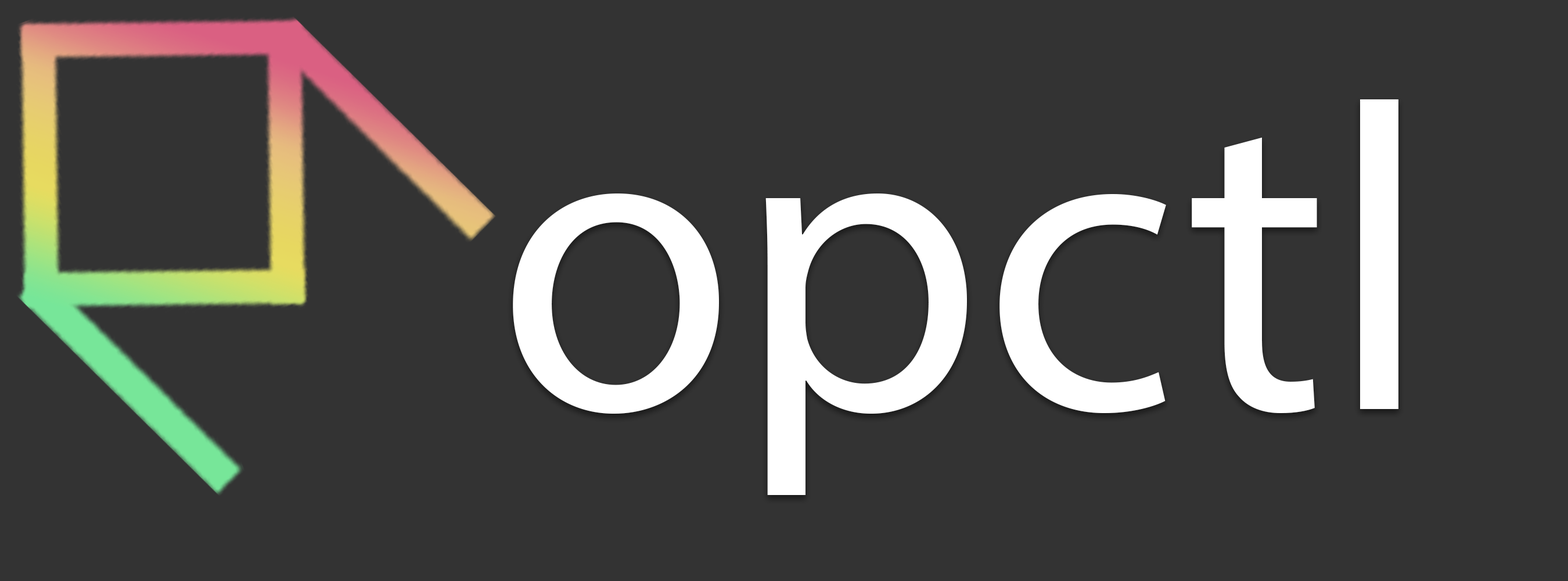
<style>
.page{position:relative;width:1568px;height:581px;background:#333333}
.page>*{position:absolute;margin:0}
.t1{font:435.6px "MyriadPro-Regular";color:#ffffff}
</style>
<div class="page">
<p class="t1" style="left:513px;top:99px;width:885px;height:396px">opctl</p>
</div>
